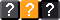
<style>
.page{position:relative;width:60px;height:20px}
.page>*{position:absolute;margin:0}
.t1{font:18px "ArialMT";color:#ffffff}
</style>
<div class="page">
<p class="t1" style="left:6px;top:3px;width:8px;height:13px">?</p>
<p class="t1" style="left:26px;top:3px;width:8px;height:13px">?</p>
<p class="t1" style="left:46px;top:3px;width:8px;height:13px">?</p>
</div>
